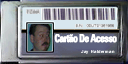
<style>
.page{position:relative;width:128px;height:64px}
.page>*{position:absolute;margin:0}
.t1{font:10.8px "Univers-CondensedBold";letter-spacing:-0.075em;color:#ffffff;font-weight:bold;scale:0.89 1}
</style>
<div class="page">
<p class="t1" style="left:54px;top:34px;width:63px;height:9px">Cartão De Acesso</p>
</div>
